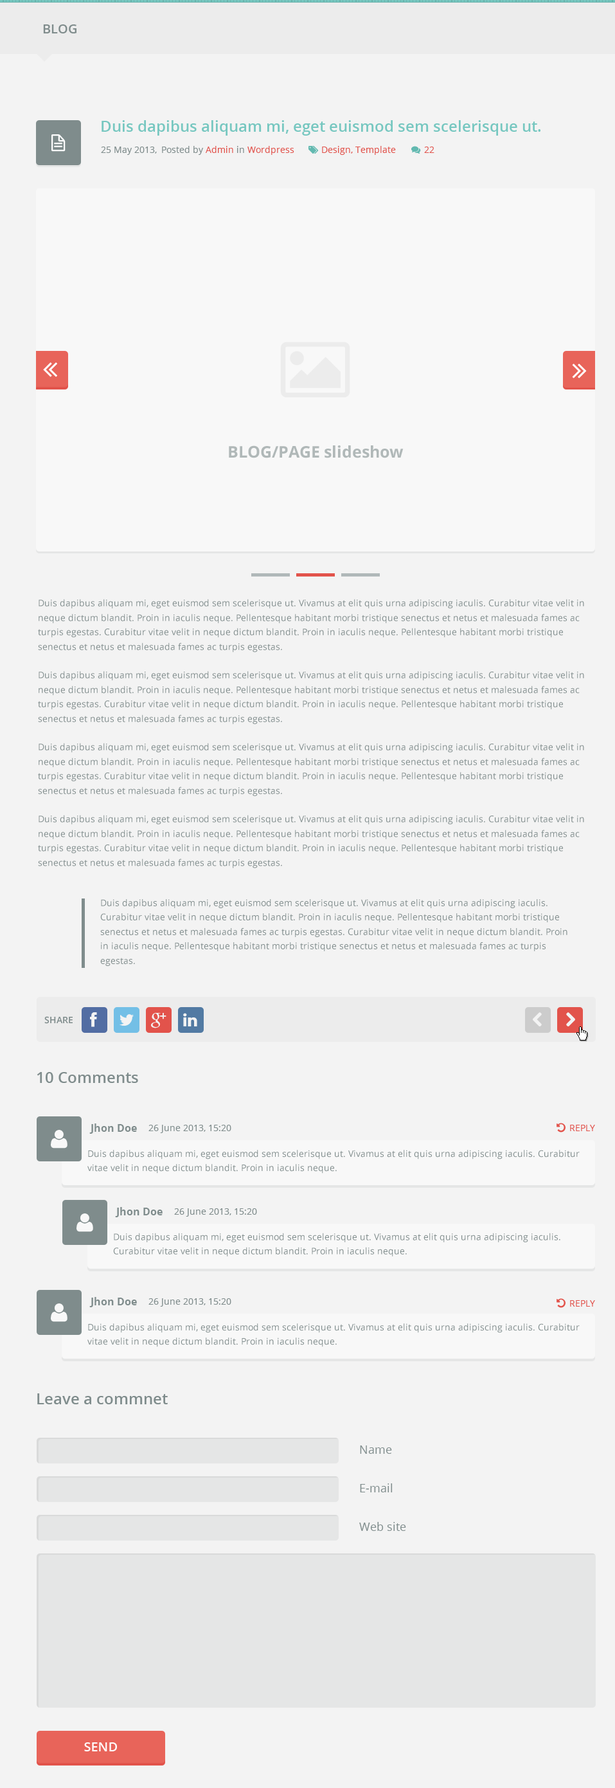
<style>
.page{position:relative;width:615px;height:1788px;background:#f3f3f3}
.page>*{position:absolute;margin:0}
.t1{font:12.9px "OpenSans-Semibold";color:#7f8c8c}
.t2{font:15.4px "OpenSans-Semibold";color:#76c7c0}
.t3{font:9px "OpenSans";color:#7f8c8c}
.t4{font:9px "OpenSans";color:#e2534b}
.t5{font:16.1px "OpenSans-Bold";color:#b0b8b8}
.t6{font:9px/14.4px "OpenSans";color:#7f8c8c}
.t7{font:9px "OpenSans-Semibold";color:#7f8c8c}
.t8{font:15.4px "OpenSans-Semibold";color:#7f8c8c}
.t9{font:10.3px "OpenSans-Bold";color:#7f8c8c}
.t10{font:11.6px "OpenSans";color:#7f8c8c}
.t11{font:12.9px "OpenSans-Semibold";color:#ffffff}
</style>
<div class="page">
<p class="t1" style="left:43px;top:24px;width:33px;height:9px">BLOG</p>
<p class="t2" style="left:102px;top:120px;width:439px;height:16px">Duis dapibus aliquam mi, eget euismod sem scelerisque ut.</p>
<p class="t3" style="left:101px;top:147px;width:56px;height:8px">25 May 2013,</p>
<p class="t3" style="left:162px;top:146px;width:132px;height:9px">Posted by <span class="t4">Admin </span>in <span class="t4">Wordpress</span></p>
<p class="t4" style="left:322px;top:146px;width:74px;height:9px">Design, Template</p>
<p class="t4" style="left:424px;top:147px;width:11px;height:6px">22</p>
<p class="t5" style="left:229px;top:446px;width:175px;height:12px">BLOG/PAGE slideshow</p>
<p class="t6" style="left:38px;top:599px;width:546px;height:270px">Duis dapibus aliquam mi, eget euismod sem scelerisque ut. Vivamus at elit quis urna adipiscing iaculis. Curabitur vitae velit in neque dictum blandit. Proin in iaculis neque. Pellentesque habitant morbi tristique senectus et netus et malesuada fames ac turpis egestas. Curabitur vitae velit in neque dictum blandit. Proin in iaculis neque. Pellentesque habitant morbi tristique senectus et netus et malesuada fames ac turpis egestas. <br><br>Duis dapibus aliquam mi, eget euismod sem scelerisque ut. Vivamus at elit quis urna adipiscing iaculis. Curabitur vitae velit in neque dictum blandit. Proin in iaculis neque. Pellentesque habitant morbi tristique senectus et netus et malesuada fames ac turpis egestas. Curabitur vitae velit in neque dictum blandit. Proin in iaculis neque. Pellentesque habitant morbi tristique senectus et netus et malesuada fames ac turpis egestas. <br><br>Duis dapibus aliquam mi, eget euismod sem scelerisque ut. Vivamus at elit quis urna adipiscing iaculis. Curabitur vitae velit in neque dictum blandit. Proin in iaculis neque. Pellentesque habitant morbi tristique senectus et netus et malesuada fames ac turpis egestas. Curabitur vitae velit in neque dictum blandit. Proin in iaculis neque. Pellentesque habitant morbi tristique senectus et netus et malesuada fames ac turpis egestas. <br><br>Duis dapibus aliquam mi, eget euismod sem scelerisque ut. Vivamus at elit quis urna adipiscing iaculis. Curabitur vitae velit in neque dictum blandit. Proin in iaculis neque. Pellentesque habitant morbi tristique senectus et netus et malesuada fames ac turpis egestas. Curabitur vitae velit in neque dictum blandit. Proin in iaculis neque. Pellentesque habitant morbi tristique senectus et netus et malesuada fames ac turpis egestas.</p>
<p class="t6" style="left:100px;top:899px;width:468px;height:67px">Duis dapibus aliquam mi, eget euismod sem scelerisque ut. Vivamus at elit quis urna adipiscing iaculis. Curabitur vitae velit in neque dictum blandit. Proin in iaculis neque. Pellentesque habitant morbi tristique senectus et netus et malesuada fames ac turpis egestas. Curabitur vitae velit in neque dictum blandit. Proin in iaculis neque. Pellentesque habitant morbi tristique senectus et netus et malesuada fames ac turpis egestas.</p>
<p class="t7" style="left:44px;top:1016px;width:29px;height:8px">SHARE</p>
<p class="t8" style="left:37px;top:1072px;width:101px;height:11px">10 Comments</p>
<p class="t9" style="left:89px;top:1124px;width:48px;height:10px">Jhon Doe</p>
<p class="t3" style="left:148px;top:1125px;width:83px;height:8px">26 June 2013, 15:20</p>
<p class="t4" style="left:570px;top:1125px;width:25px;height:6px">REPLY</p>
<p class="t6" style="left:87px;top:1150px;width:493px;height:24px">Duis dapibus aliquam mi, eget euismod sem scelerisque ut. Vivamus at elit quis urna adipiscing iaculis. Curabitur vitae velit in neque dictum blandit. Proin in iaculis neque.</p>
<p class="t9" style="left:115px;top:1207px;width:48px;height:11px">Jhon Doe</p>
<p class="t3" style="left:174px;top:1209px;width:83px;height:8px">26 June 2013, 15:20</p>
<p class="t6" style="left:113px;top:1233px;width:448px;height:24px">Duis dapibus aliquam mi, eget euismod sem scelerisque ut. Vivamus at elit quis urna adipiscing iaculis. Curabitur vitae velit in neque dictum blandit. Proin in iaculis neque.</p>
<p class="t9" style="left:89px;top:1297px;width:48px;height:11px">Jhon Doe</p>
<p class="t3" style="left:148px;top:1299px;width:83px;height:8px">26 June 2013, 15:20</p>
<p class="t4" style="left:570px;top:1300px;width:25px;height:7px">REPLY</p>
<p class="t6" style="left:87px;top:1324px;width:493px;height:23px">Duis dapibus aliquam mi, eget euismod sem scelerisque ut. Vivamus at elit quis urna adipiscing iaculis. Curabitur vitae velit in neque dictum blandit. Proin in iaculis neque.</p>
<p class="t8" style="left:37px;top:1394px;width:131px;height:11px">Leave a commnet</p>
<p class="t10" style="left:360px;top:1446px;width:32px;height:8px">Name</p>
<p class="t10" style="left:360px;top:1484px;width:33px;height:9px">E-mail</p>
<p class="t10" style="left:359px;top:1522px;width:47px;height:9px">Web site</p>
<p class="t11" style="left:84px;top:1743px;width:33px;height:9px">SEND</p>
</div>
